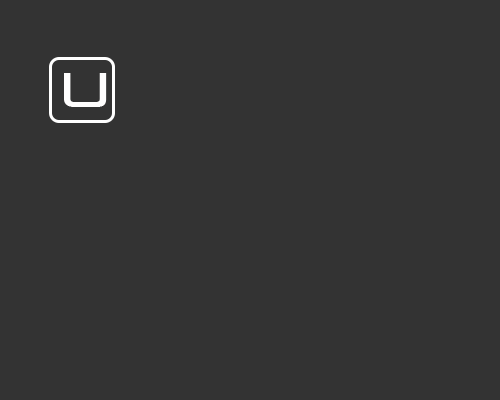
<style>
.page{position:relative;width:500px;height:400px;background:#333333}
.page>*{position:absolute;margin:0}
.t1{font:48px "PirulenRg-Regular";color:#fffefe}
</style>
<div class="page">
<p class="t1" style="left:64px;top:73px;width:43px;height:34px">U</p>
</div>
